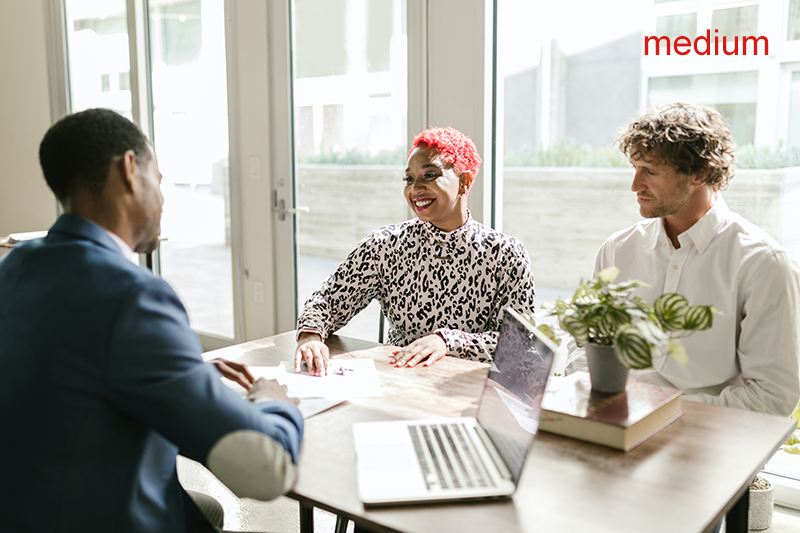
<style>
.page{position:relative;width:800px;height:533px}
.page>*{position:absolute;margin:0}
.t1{font:36px "ArialMT";color:#dc1813}
</style>
<div class="page">
<p class="t1" style="left:644px;top:29px;width:125px;height:27px">medium</p>
</div>
